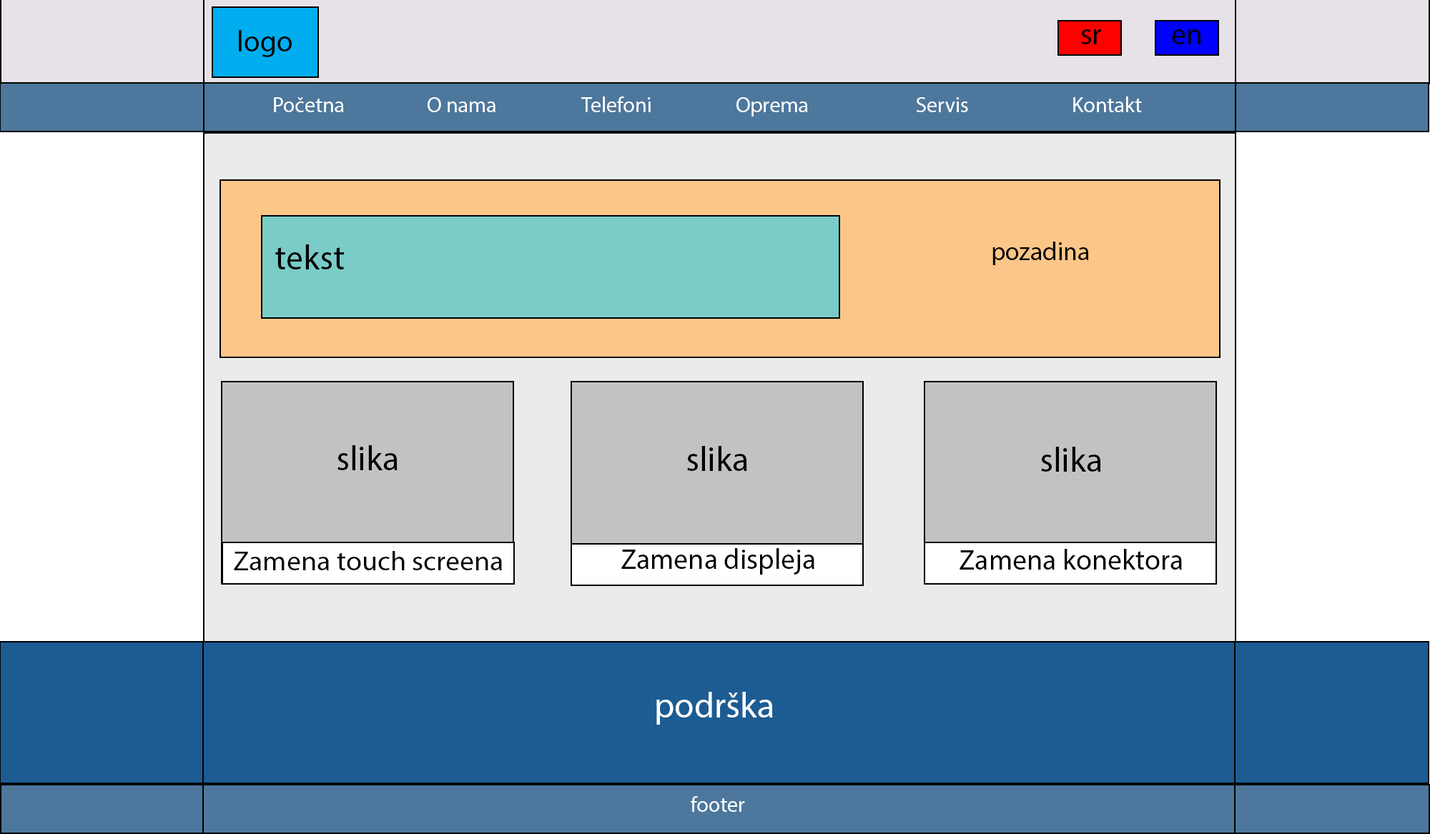
<style>
.page{position:relative;width:1430px;height:834px}
.page>*{position:absolute;margin:0}
.t1{font:29.8px "MyriadPro-Regular";color:#000101}
.t2{font:21.4px "MyriadPro-Regular";color:#ffffff}
.t3{font:21.4px "MyriadPro-Regular";color:#000101}
.t4{font:34.3px "MyriadPro-Regular";color:#000000}
.t5{font:25.7px "MyriadPro-Regular";color:#000000}
.t6{font:27.3px "MyriadPro-Regular";color:#000000;scale:1.05 1}
.t7{font:28.6px "MyriadPro-Regular";color:#000000}
.t8{font:35.7px "MyriadPro-Regular";color:#ffffff}
</style>
<div class="page">
<p class="t1" style="left:1081px;top:29px;width:20px;height:15px">sr</p>
<p class="t1" style="left:1172px;top:29px;width:28px;height:15px">en</p>
<p class="t1" style="left:239px;top:30px;width:53px;height:27px">logo</p>
<p class="t2" style="left:274px;top:96px;width:867px;height:21px"><span class="t3">  </span>Početna    O nama    Telefoni    Oprema     Servis Kontakt</p>
<p class="t4" style="left:275px;top:244px;width:69px;height:25px">tekst</p>
<p class="t5" style="left:992px;top:242px;width:97px;height:23px">pozadina</p>
<p class="t4" style="left:337px;top:445px;width:60px;height:25px">slika</p>
<p class="t4" style="left:687px;top:446px;width:60px;height:25px">slika</p>
<p class="t4" style="left:1041px;top:447px;width:60px;height:25px">slika</p>
<p class="t6" style="left:234px;top:551px;width:268px;height:19px">Zamena touch screena</p>
<p class="t7" style="left:621px;top:548px;width:193px;height:27px">Zamena displeja</p>
<p class="t7" style="left:959px;top:549px;width:223px;height:21px">Zamena konektora</p>
<p class="t8" style="left:656px;top:692px;width:117px;height:33px">podrška</p>
<p class="t2" style="left:690px;top:796px;width:55px;height:16px">footer</p>
</div>
